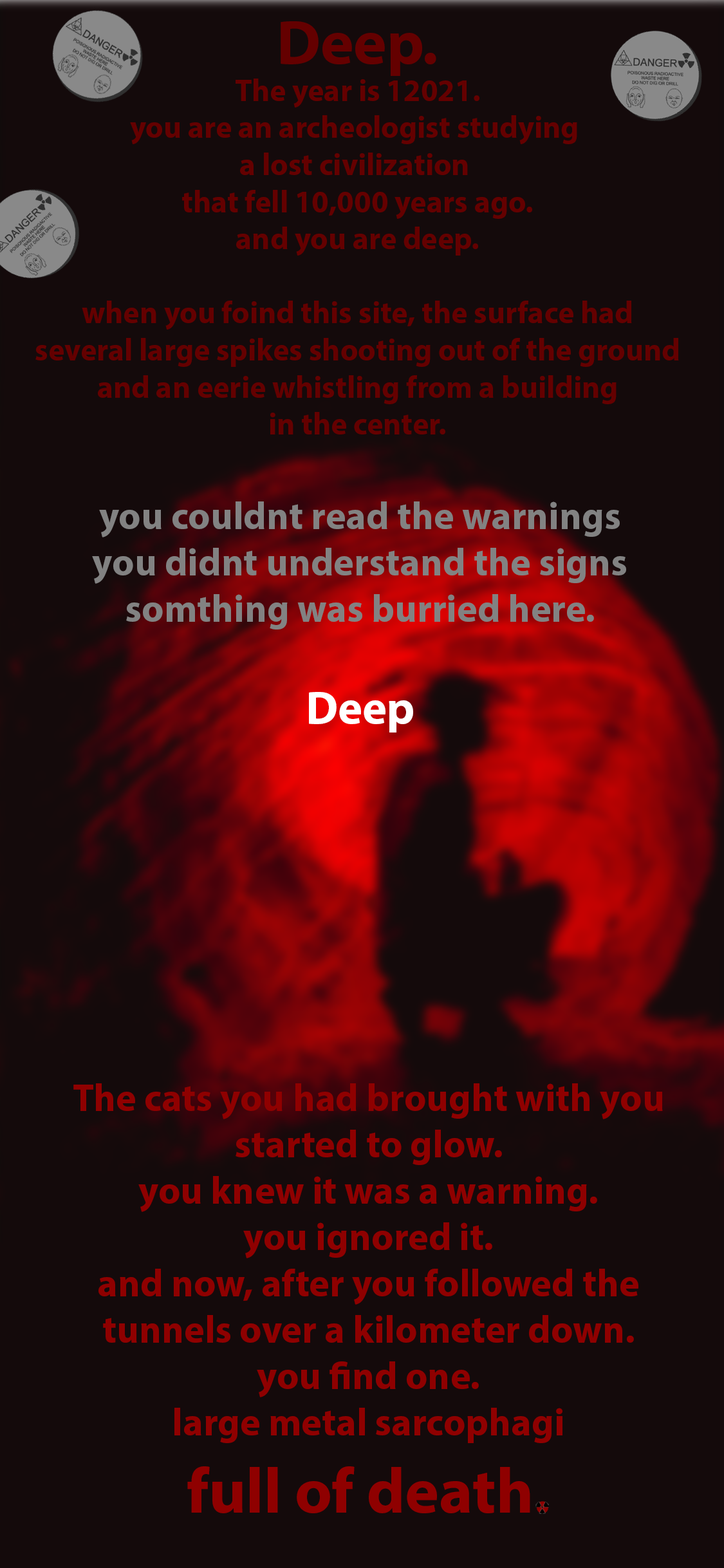
<style>
.page{position:relative;width:724px;height:1568px;background:#140a0b}
.page>*{position:absolute;margin:0}
.t1{font:30.9px "MyriadPro-Bold";color:#640000}
.t2{font:62.6px "MyriadPro-Bold";color:#640000}
.t3{font:38.6px "MyriadPro-Bold";color:#828282}
.t4{font:46.3px "MyriadPro-Bold";color:#ffffff}
.t5{font:38.6px "MyriadPro-Bold";color:#8f0000}
.t6{font:64.4px "MyriadPro-Bold";color:#8f0000}
</style>
<div class="page">
<p class="t1" style="left:35px;top:21px;width:644px;height:413px;text-align:center"><span class="t2">Deep.<br></span>The year is 12021.<br>you are an archeologist studying <br>a lost civilization <br>that fell 10,000 years ago.<br>and you are deep.<br><br>when you foind this site, the surface had<br>several large spikes shooting out of the ground<br>and an eerie whistling from a building<br>in the center.</p>
<p class="t3" style="left:92px;top:501px;width:534px;height:232px;text-align:center">you couldnt read the warnings<br>you didnt understand the signs<br>somthing was burried here.<br><br><span class="t4">Deep</span></p>
<p class="t5" style="left:73px;top:1083px;width:590px;height:430px;text-align:center">The cats you had brought with you<br>started to glow.<br>you knew it was a warning.<br>you ignored it.<br>and now, after you followed the tunnels over a kilometer down.<br>you find one.<br>large metal sarcophagi<br><span class="t6">full of death.</span></p>
</div>
